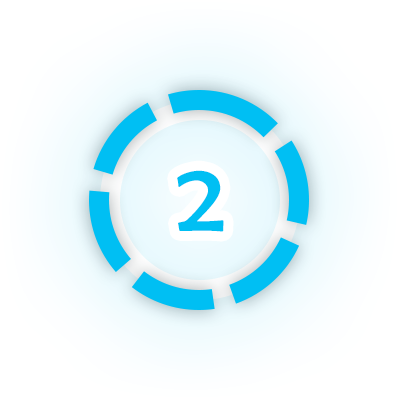
<style>
.page{position:relative;width:400px;height:400px}
.page>*{position:absolute;margin:0}
.t1{font:100px "BerlinSansFB-Reg";color:#00bff3}
</style>
<div class="page">
<p class="t1" style="left:177px;top:170px;width:47px;height:62px">2</p>
</div>
